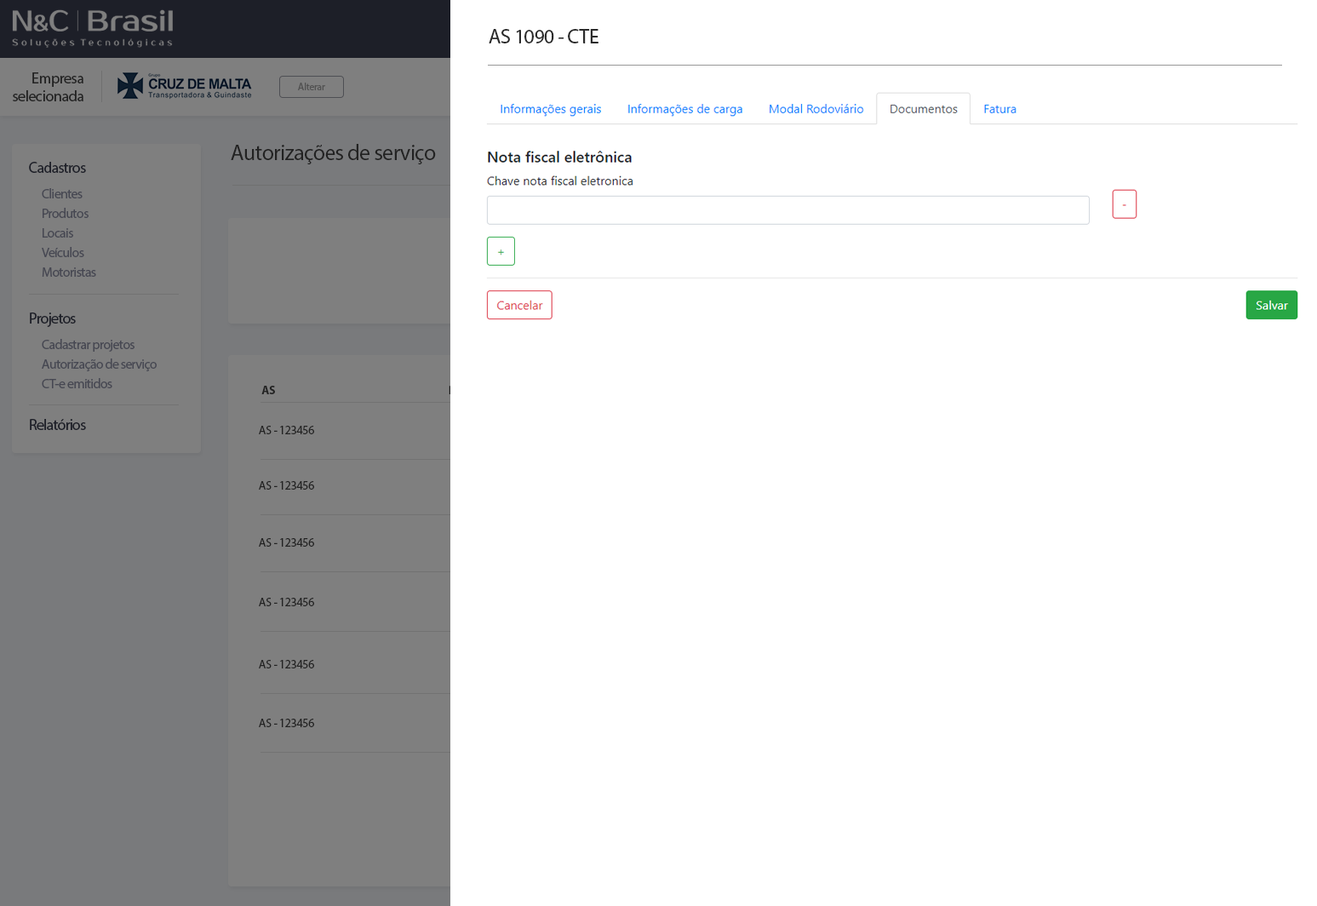
<style>
.page{position:relative;width:1317px;height:906px;background:#ffffff}
.page>*{position:absolute;margin:0}
.t1{font:20.4px "MyriadPro-Regular";letter-spacing:-0.025em;color:#2a2a2a}
.t2{font:15.3px/17.8px "MyriadPro-Regular";letter-spacing:-0.025em;color:#222222}
.t3{font:10.2px "MyriadPro-Regular";letter-spacing:-0.025em;color:#454545}
.t4{font:22.1px "MyriadPro-Regular";letter-spacing:-0.025em;color:#222222}
.t5{font:15.3px "MyriadPro-Regular";letter-spacing:-0.045em;color:#1d1f28}
.t6{font:13.6px "MyriadPro-Regular";letter-spacing:-0.045em;color:#464752}
.t7{font:13.6px "MyriadPro-Regular";letter-spacing:-0.045em;color:#464852}
.t8{font:11.9px "MyriadPro-Bold";letter-spacing:-0.025em;color:#222222}
.t9{font:11.9px "MyriadPro-Regular";letter-spacing:-0.025em;color:#222222}
</style>
<div class="page">
<p class="t1" style="left:489px;top:29px;width:109px;height:14px">AS 1090 - CTE</p>
<p class="t2" style="left:13px;top:72px;width:70px;height:29px;text-align:right">Empresa<br>selecionada</p>
<p class="t3" style="left:298px;top:83px;width:27px;height:7px">Alterar</p>
<p class="t4" style="left:231px;top:144px;width:205px;height:20px">Autorizações de serviço</p>
<p class="t5" style="left:29px;top:162px;width:57px;height:11px">Cadastros</p>
<p class="t6" style="left:42px;top:188px;width:41px;height:10px">Clientes</p>
<p class="t6" style="left:43px;top:208px;width:46px;height:10px">Produtos</p>
<p class="t6" style="left:43px;top:228px;width:30px;height:9px">Locais</p>
<p class="t6" style="left:42px;top:247px;width:42px;height:10px">Veículos</p>
<p class="t6" style="left:42px;top:267px;width:54px;height:10px">Motoristas</p>
<p class="t5" style="left:30px;top:312px;width:46px;height:15px">Projetos</p>
<p class="t6" style="left:42px;top:339px;width:92px;height:13px">Cadastrar projetos</p>
<p class="t7" style="left:42px;top:358px;width:115px;height:13px">Autorização de serviço</p>
<p class="t6" style="left:42px;top:378px;width:70px;height:10px">CT-e emitidos</p>
<p class="t8" style="left:261px;top:386px;width:14px;height:8px">AS</p>
<p class="t5" style="left:30px;top:419px;width:56px;height:11px">Relatórios</p>
<p class="t9" style="left:259px;top:426px;width:55px;height:8px">AS - 123456</p>
<p class="t9" style="left:259px;top:481px;width:55px;height:8px">AS - 123456</p>
<p class="t9" style="left:259px;top:538px;width:55px;height:8px">AS - 123456</p>
<p class="t9" style="left:259px;top:598px;width:55px;height:8px">AS - 123456</p>
<p class="t9" style="left:259px;top:660px;width:55px;height:8px">AS - 123456</p>
<p class="t9" style="left:259px;top:718px;width:55px;height:9px">AS - 123456</p>
</div>
